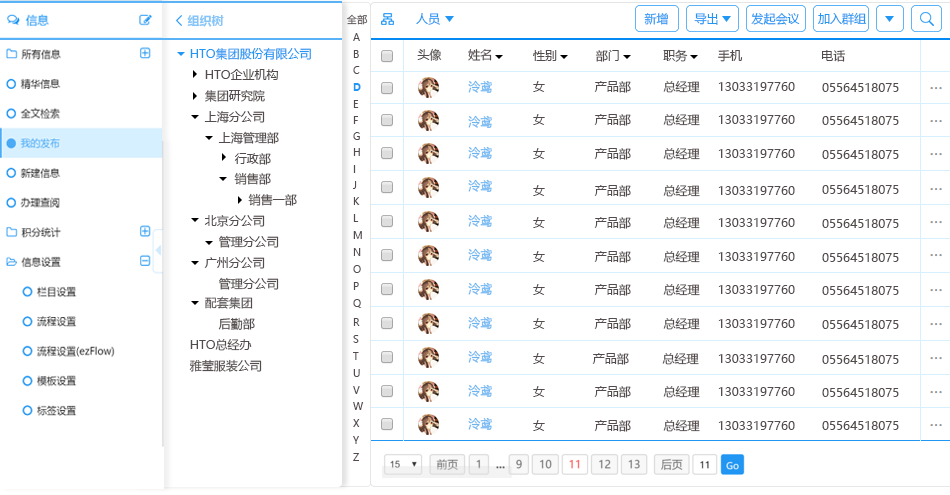
<style>
.page{position:relative;width:950px;height:495px;background:#ffffff}
.page>*{position:absolute;margin:0}
.t1{font:12px "MicrosoftYaHei-Bold";color:#85c5f8}
.t2{font:10px "MicrosoftYaHei"}
.t3{font:12px "MicrosoftYaHei";color:#2196f3}
.t4{font:12px "MicrosoftYaHei"}
.t5{font:10px "MicrosoftYaHei";color:#544c4c}
.t6{font:12px "MicrosoftYaHei";color:#544c4c}
.t7{font:10px "MicrosoftYaHei-Bold";color:#2196f3}
.t8{font:12px "MicrosoftYaHei";color:#6bb5f1}
</style>
<div class="page">
<p class="t1" style="left:187px;top:15px;width:37px;height:12px">组织树</p>
<p class="t2" style="left:347px;top:14px;width:21px;height:11px">全部</p>
<p class="t3" style="left:416px;top:13px;width:24px;height:12px">人员</p>
<p class="t4" style="left:644px;top:13px;width:24px;height:12px">新增</p>
<p class="t3" style="left:694px;top:13px;width:24px;height:12px">导出</p>
<p class="t3" style="left:751px;top:12px;width:49px;height:13px">发起会议</p>
<p class="t3" style="left:817px;top:12px;width:50px;height:13px">加入群组</p>
<p class="t5" style="left:353px;top:33px;width:7px;height:8px">A</p>
<p class="t3" style="left:190px;top:47px;width:121px;height:13px">HTO集团股份有限公司</p>
<p class="t5" style="left:353px;top:50px;width:6px;height:8px">B</p>
<p class="t6" style="left:417px;top:48px;width:25px;height:13px">头像</p>
<p class="t6" style="left:468px;top:49px;width:24px;height:12px">姓名</p>
<p class="t6" style="left:533px;top:50px;width:24px;height:11px">性别</p>
<p class="t6" style="left:595px;top:50px;width:24px;height:12px">部门</p>
<p class="t6" style="left:663px;top:49px;width:25px;height:13px">职务</p>
<p class="t6" style="left:718px;top:50px;width:25px;height:12px">手机</p>
<p class="t6" style="left:822px;top:50px;width:24px;height:12px">电话</p>
<p class="t6" style="left:205px;top:69px;width:73px;height:11px">HTO企业机构</p>
<p class="t5" style="left:353px;top:66px;width:7px;height:8px">C</p>
<p class="t7" style="left:353px;top:83px;width:8px;height:8px">D</p>
<p class="t8" style="left:468px;top:80px;width:24px;height:13px">泠鸢</p>
<p class="t6" style="left:533px;top:81px;width:12px;height:11px">女</p>
<p class="t6" style="left:594px;top:81px;width:37px;height:12px">产品部</p>
<p class="t6" style="left:663px;top:81px;width:37px;height:12px">总经理</p>
<p class="t6" style="left:718px;top:82px;width:77px;height:9px">13033197760</p>
<p class="t6" style="left:822px;top:83px;width:77px;height:9px">05564518075</p>
<p class="t6" style="left:205px;top:90px;width:60px;height:12px">集团研究院</p>
<p class="t5" style="left:353px;top:100px;width:6px;height:8px">E</p>
<p class="t6" style="left:204px;top:110px;width:61px;height:13px">上海分公司</p>
<p class="t5" style="left:353px;top:116px;width:5px;height:8px">F</p>
<p class="t8" style="left:468px;top:115px;width:24px;height:13px">泠鸢</p>
<p class="t6" style="left:533px;top:114px;width:12px;height:11px">女</p>
<p class="t6" style="left:594px;top:114px;width:37px;height:12px">产品部</p>
<p class="t6" style="left:663px;top:114px;width:37px;height:12px">总经理</p>
<p class="t6" style="left:718px;top:115px;width:77px;height:9px">13033197760</p>
<p class="t6" style="left:822px;top:116px;width:77px;height:9px">05564518075</p>
<p class="t6" style="left:218px;top:131px;width:61px;height:13px">上海管理部</p>
<p class="t5" style="left:353px;top:132px;width:7px;height:8px">G</p>
<p class="t5" style="left:353px;top:148px;width:7px;height:8px">H</p>
<p class="t8" style="left:468px;top:146px;width:24px;height:13px">泠鸢</p>
<p class="t6" style="left:533px;top:148px;width:12px;height:11px">女</p>
<p class="t6" style="left:594px;top:148px;width:37px;height:12px">产品部</p>
<p class="t6" style="left:663px;top:148px;width:37px;height:12px">总经理</p>
<p class="t6" style="left:718px;top:149px;width:77px;height:9px">13033197760</p>
<p class="t6" style="left:822px;top:150px;width:77px;height:9px">05564518075</p>
<p class="t6" style="left:234px;top:153px;width:37px;height:12px">行政部</p>
<p class="t6" style="left:234px;top:172px;width:37px;height:13px">销售部</p>
<p class="t5" style="left:353px;top:165px;width:3px;height:8px">I</p>
<p class="t5" style="left:353px;top:181px;width:4px;height:8px">J</p>
<p class="t8" style="left:468px;top:179px;width:24px;height:13px">泠鸢</p>
<p class="t6" style="left:533px;top:185px;width:12px;height:11px">女</p>
<p class="t6" style="left:594px;top:185px;width:37px;height:12px">产品部</p>
<p class="t6" style="left:663px;top:185px;width:37px;height:12px">总经理</p>
<p class="t6" style="left:822px;top:185px;width:77px;height:9px">05564518075</p>
<p class="t6" style="left:248px;top:193px;width:49px;height:13px">销售一部</p>
<p class="t5" style="left:353px;top:197px;width:7px;height:8px">K</p>
<p class="t6" style="left:718px;top:186px;width:77px;height:9px">13033197760</p>
<p class="t6" style="left:204px;top:215px;width:61px;height:12px">北京分公司</p>
<p class="t5" style="left:353px;top:214px;width:6px;height:8px">L</p>
<p class="t8" style="left:468px;top:214px;width:24px;height:13px">泠鸢</p>
<p class="t6" style="left:533px;top:217px;width:12px;height:11px">女</p>
<p class="t6" style="left:594px;top:217px;width:37px;height:12px">产品部</p>
<p class="t6" style="left:663px;top:217px;width:37px;height:12px">总经理</p>
<p class="t6" style="left:718px;top:218px;width:77px;height:9px">13033197760</p>
<p class="t6" style="left:822px;top:219px;width:77px;height:9px">05564518075</p>
<p class="t5" style="left:353px;top:231px;width:9px;height:8px">M</p>
<p class="t6" style="left:219px;top:235px;width:60px;height:13px">管理分公司</p>
<p class="t6" style="left:204px;top:257px;width:61px;height:12px">广州分公司</p>
<p class="t5" style="left:353px;top:248px;width:8px;height:8px">N</p>
<p class="t8" style="left:468px;top:248px;width:24px;height:13px">泠鸢</p>
<p class="t6" style="left:533px;top:251px;width:12px;height:11px">女</p>
<p class="t6" style="left:594px;top:251px;width:37px;height:12px">产品部</p>
<p class="t6" style="left:663px;top:251px;width:37px;height:12px">总经理</p>
<p class="t6" style="left:718px;top:252px;width:77px;height:9px">13033197760</p>
<p class="t6" style="left:822px;top:253px;width:77px;height:9px">05564518075</p>
<p class="t5" style="left:353px;top:265px;width:8px;height:8px">O</p>
<p class="t6" style="left:219px;top:277px;width:60px;height:13px">管理分公司</p>
<p class="t5" style="left:353px;top:282px;width:6px;height:8px">P</p>
<p class="t8" style="left:468px;top:282px;width:24px;height:13px">泠鸢</p>
<p class="t6" style="left:533px;top:284px;width:12px;height:11px">女</p>
<p class="t6" style="left:594px;top:284px;width:37px;height:12px">产品部</p>
<p class="t6" style="left:663px;top:284px;width:37px;height:12px">总经理</p>
<p class="t6" style="left:718px;top:285px;width:77px;height:9px">13033197760</p>
<p class="t6" style="left:822px;top:286px;width:77px;height:9px">05564518075</p>
<p class="t6" style="left:205px;top:296px;width:48px;height:13px">配套集团</p>
<p class="t5" style="left:353px;top:299px;width:9px;height:9px">Q</p>
<p class="t6" style="left:218px;top:317px;width:37px;height:13px">后勤部</p>
<p class="t5" style="left:353px;top:318px;width:7px;height:8px">R</p>
<p class="t8" style="left:468px;top:316px;width:24px;height:13px">泠鸢</p>
<p class="t6" style="left:533px;top:318px;width:12px;height:11px">女</p>
<p class="t6" style="left:594px;top:318px;width:37px;height:12px">产品部</p>
<p class="t6" style="left:663px;top:318px;width:37px;height:12px">总经理</p>
<p class="t6" style="left:718px;top:319px;width:77px;height:9px">13033197760</p>
<p class="t6" style="left:822px;top:320px;width:77px;height:9px">05564518075</p>
<p class="t6" style="left:190px;top:339px;width:62px;height:12px">HTO总经办</p>
<p class="t5" style="left:353px;top:335px;width:6px;height:8px">S</p>
<p class="t5" style="left:353px;top:352px;width:6px;height:8px">T</p>
<p class="t8" style="left:468px;top:350px;width:24px;height:13px">泠鸢</p>
<p class="t6" style="left:533px;top:353px;width:12px;height:11px">女</p>
<p class="t6" style="left:592px;top:353px;width:37px;height:12px">产品部</p>
<p class="t6" style="left:662px;top:353px;width:37px;height:12px">总经理</p>
<p class="t6" style="left:189px;top:359px;width:73px;height:13px">雅莹服装公司</p>
<p class="t6" style="left:718px;top:354px;width:77px;height:9px">13033197760</p>
<p class="t6" style="left:822px;top:355px;width:77px;height:9px">05564518075</p>
<p class="t5" style="left:353px;top:369px;width:7px;height:8px">U</p>
<p class="t5" style="left:353px;top:386px;width:7px;height:8px">V</p>
<p class="t8" style="left:468px;top:384px;width:24px;height:13px">泠鸢</p>
<p class="t6" style="left:533px;top:386px;width:12px;height:11px">女</p>
<p class="t6" style="left:594px;top:386px;width:37px;height:12px">产品部</p>
<p class="t6" style="left:663px;top:386px;width:37px;height:12px">总经理</p>
<p class="t6" style="left:718px;top:387px;width:77px;height:9px">13033197760</p>
<p class="t6" style="left:822px;top:388px;width:77px;height:9px">05564518075</p>
<p class="t5" style="left:353px;top:402px;width:11px;height:8px">W</p>
<p class="t5" style="left:353px;top:419px;width:7px;height:8px">X</p>
<p class="t8" style="left:468px;top:417px;width:24px;height:13px">泠鸢</p>
<p class="t6" style="left:533px;top:420px;width:12px;height:11px">女</p>
<p class="t6" style="left:594px;top:420px;width:37px;height:12px">产品部</p>
<p class="t6" style="left:663px;top:420px;width:37px;height:12px">总经理</p>
<p class="t6" style="left:718px;top:421px;width:77px;height:9px">13033197760</p>
<p class="t6" style="left:822px;top:421px;width:77px;height:9px">05564518075</p>
<p class="t2" style="left:353px;top:436px;width:6px;height:8px">Y</p>
<p class="t5" style="left:353px;top:453px;width:7px;height:8px">Z</p>
</div>
